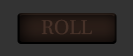
<style>
.page{position:relative;width:133px;height:56px;background:#333333}
.page>*{position:absolute;margin:0}
.t1{font:20px "UnJamoBatang";color:#473229}
</style>
<div class="page">
<p class="t1" style="left:41px;top:19px;width:51px;height:16px">ROLL</p>
</div>
